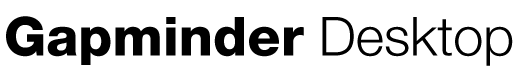
<style>
.page{position:relative;width:520px;height:75px;background:#ffffff}
.page>*{position:absolute;margin:0}
.t1{font:54px "HelveticaNeueLTStd-Hv";color:#000000}
.t2{font:54px "HelveticaNeueLTStd-Lt";color:#000000}
</style>
<div class="page">
<p class="t1" style="left:6px;top:16px;width:507px;height:50px">Gapminder<span class="t2"> Desktop</span></p>
</div>
